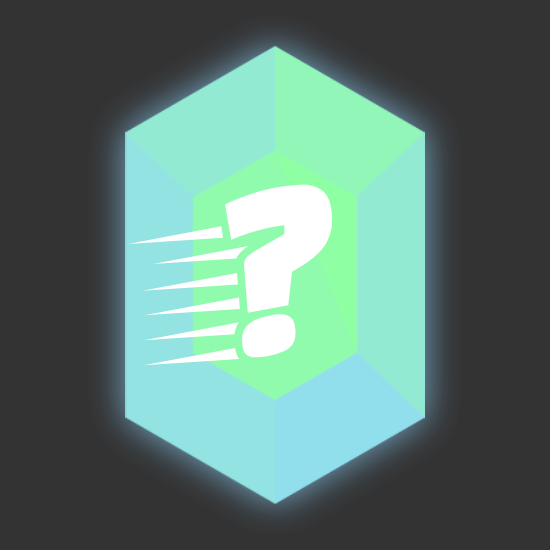
<style>
.page{position:relative;width:550px;height:550px;background:#333333}
.page>*{position:absolute;margin:0}
.t1{font:253.9px "FasterOne-Regular";color:#ffffff}
</style>
<div class="page">
<p class="t1" style="left:128px;top:184px;width:205px;height:182px;rotate:-11deg">?</p>
</div>
